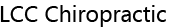
<style>
.page{position:relative;width:171px;height:27px;background:#ffffff}
.page>*{position:absolute;margin:0}
.t1{font:23px "MyanmarText";color:#000000}
</style>
<div class="page">
<p class="t1" style="left:0px;top:5px;width:166px;height:22px">LCC Chiropractic</p>
</div>
